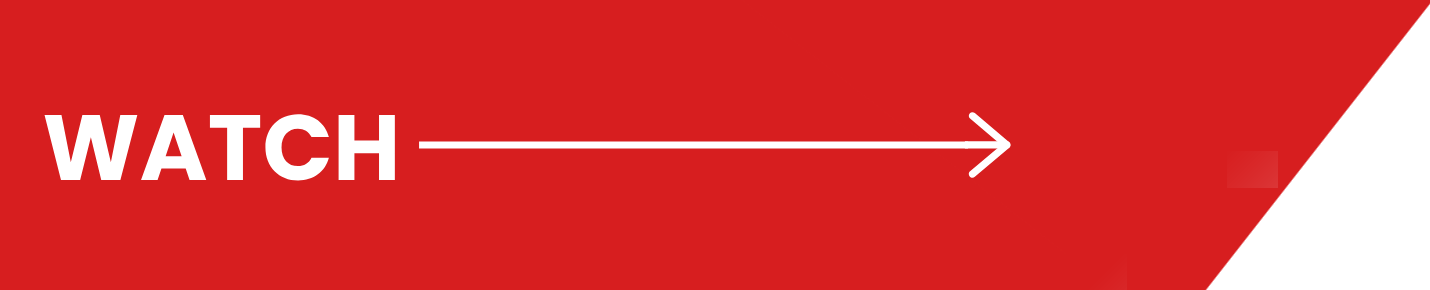
<style>
.page{position:relative;width:1430px;height:290px;background:#d71e1f}
.page>*{position:absolute;margin:0}
.t1{font:92.5px "Poppins-Bold";color:#ffffff}
</style>
<div class="page">
<p class="t1" style="left:44px;top:114px;width:351px;height:67px">WATCH</p>
</div>
